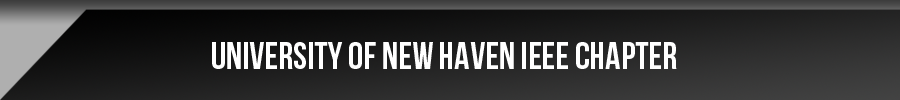
<style>
.page{position:relative;width:900px;height:100px}
.page>*{position:absolute;margin:0}
.t1{font:37.5px "BebasNeue";color:#ffffff}
</style>
<div class="page">
<p class="t1" style="left:212px;top:42px;width:465px;height:27px">University of New Haven IEEE Chapter</p>
</div>
